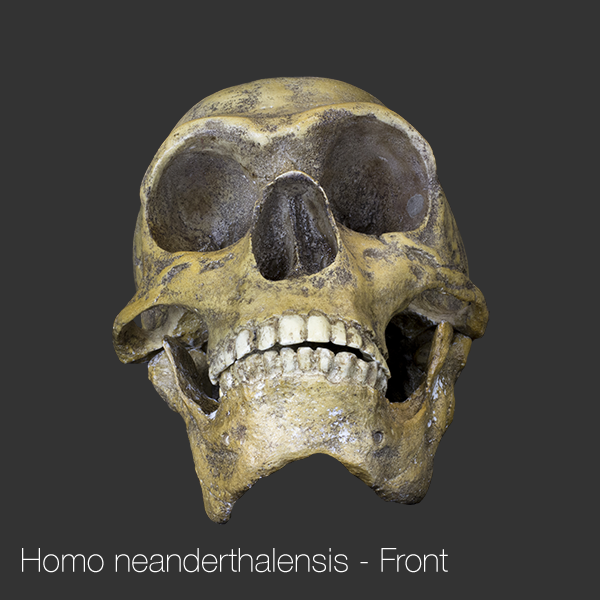
<style>
.page{position:relative;width:600px;height:600px;background:#333333}
.page>*{position:absolute;margin:0}
.t1{font:33.3px "HelveticaNeue-Thin";color:#ffffff}
</style>
<div class="page">
<p class="t1" style="left:22px;top:548px;width:426px;height:25px">Homo neanderthalensis - Front</p>
</div>
